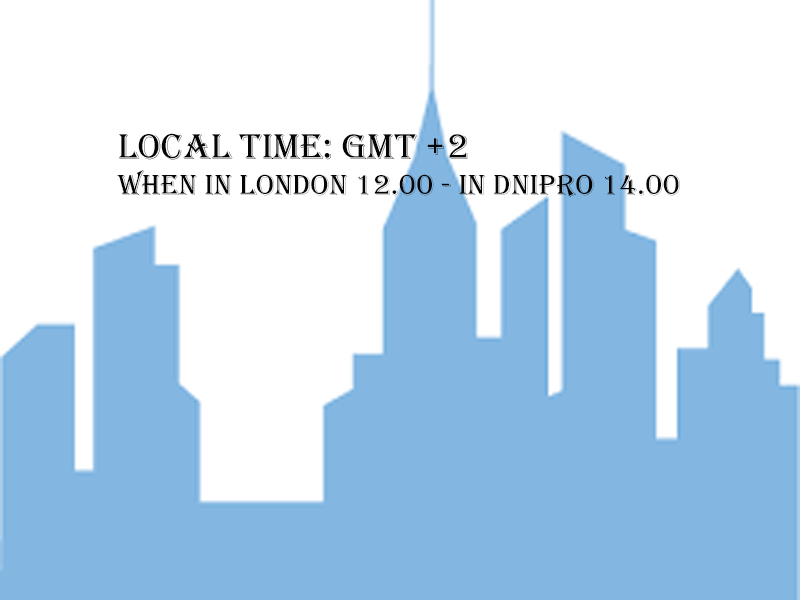
<style>
.page{position:relative;width:800px;height:600px;background:#ffffff}
.page>*{position:absolute;margin:0}
.t1{font:30px "Algerian";color:#050505}
.t2{font:37px "Algerian";color:#050505}
</style>
<div class="page">
<p class="t1" style="left:117px;top:133px;width:563px;height:64px"><span class="t2">LOCAL TIME: GMT +2 <br></span>when in London 12.00 - in Dnipro 14.00</p>
</div>
